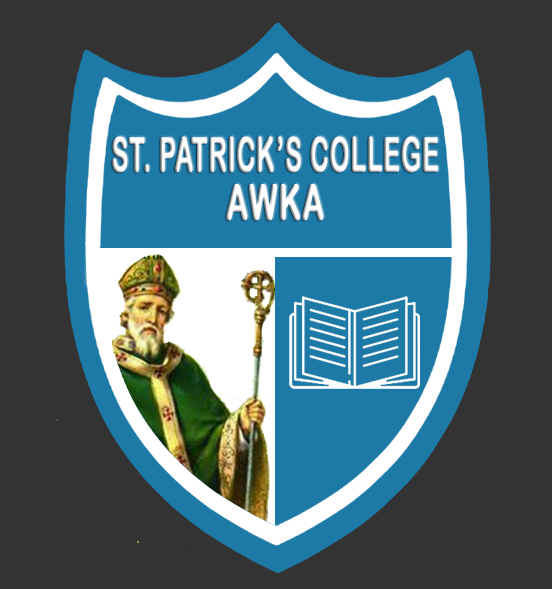
<style>
.page{position:relative;width:552px;height:589px;background:#333333}
.page>*{position:absolute;margin:0}
.t1{font:47.3px "ArialRoundedMTBold";letter-spacing:0.02em;color:#ffffff;font-weight:bold;scale:0.53 1}
.t2{font:48px/48px "ArialRoundedMTBold";letter-spacing:0.02em;color:#ffffff;font-weight:bold;scale:0.62 1}
</style>
<div class="page">
<p class="t1" style="left:112px;top:136px;width:326px;height:85px;text-align:center">ST. PATRICK’S COLLEGE<br><span class="t2">AWKA</span></p>
</div>
